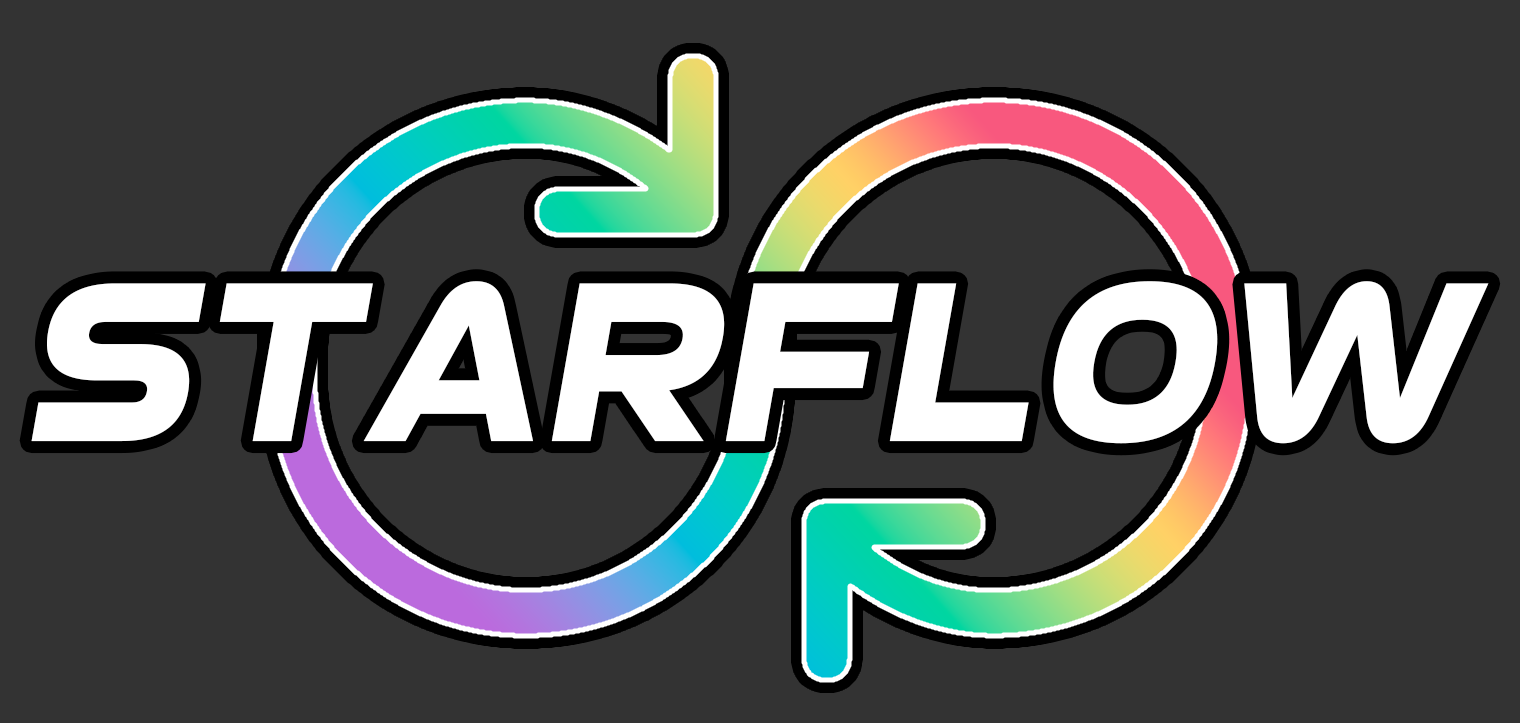
<style>
.page{position:relative;width:1520px;height:723px;background:#333333}
.page>*{position:absolute;margin:0}
.t1{font:225px "PraaBetta-BoldItalic";color:#ffffff}
</style>
<div class="page">
<p class="t1" style="left:31px;top:281px;width:1458px;height:163px">Starflow</p>
</div>
